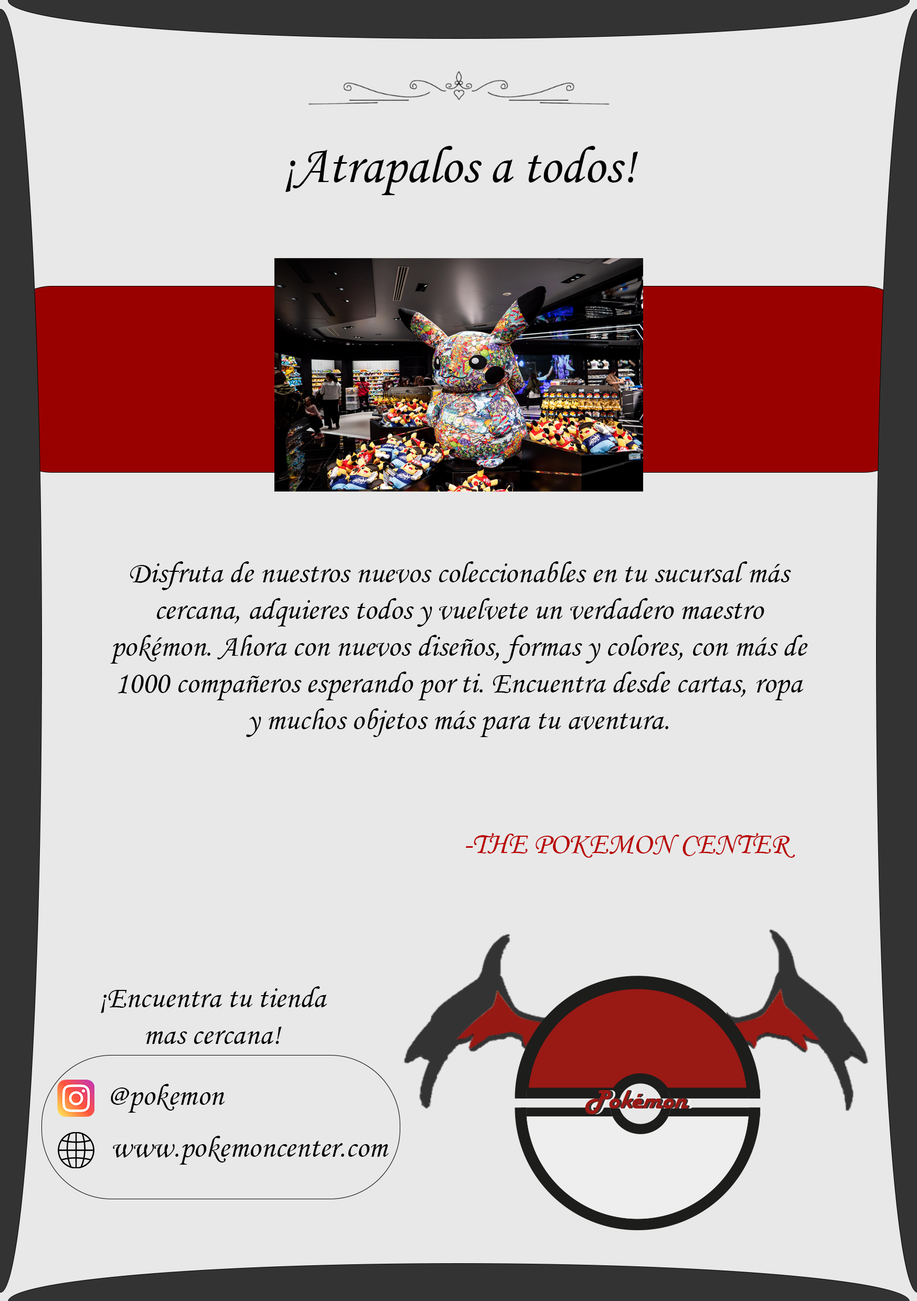
<style>
.page{position:relative;width:917px;height:1301px;background:#e8e8e8}
.page>*{position:absolute;margin:0}
.t1{font:52.4px "MonotypeCorsiva";color:#000000}
.t2{font:30.6px "MonotypeCorsiva";color:#000000}
.t3{font:30.6px "MonotypeCorsiva";color:#b90504}
</style>
<div class="page">
<p class="t1" style="left:285px;top:146px;width:353px;height:49px">¡Atrapalos a todos!</p>
<p class="t2" style="left:110px;top:561px;width:698px;height:176px;text-align:center">Disfruta de nuestros nuevos coleccionables en tu sucursal más cercana, adquieres todos y vuelvete un verdadero maestro pokémon. Ahora con nuevos diseños, formas y colores, con más de 1000 compañeros esperando por ti. Encuentra desde cartas, ropa y muchos objetos más para tu aventura.</p>
<p class="t3" style="left:465px;top:833px;width:330px;height:25px">-THE POKEMON CENTER</p>
<p class="t2" style="left:101px;top:986px;width:226px;height:58px;text-align:center">¡Encuentra tu tienda mas cercana!</p>
<p class="t2" style="left:111px;top:1084px;width:114px;height:28px">@pokemon</p>
<p class="t2" style="left:113px;top:1135px;width:276px;height:29px">www.pokemoncenter.com</p>
</div>
